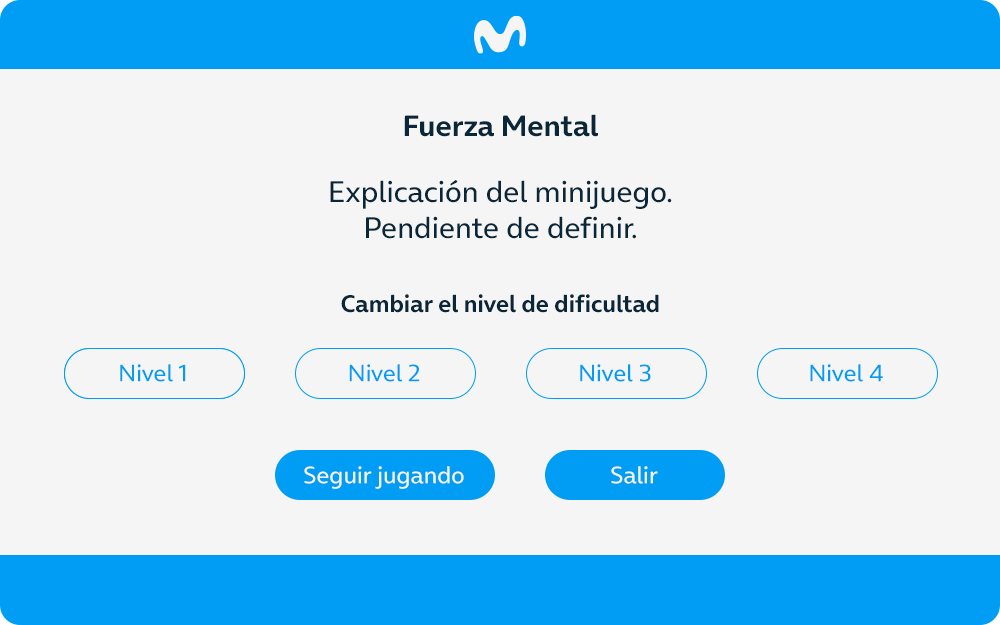
<style>
.page{position:relative;width:1000px;height:625px;background:#f5f5f5}
.page>*{position:absolute;margin:0}
.t1{font:30px "OnAir-Bold";color:#0a2739}
.t2{font:30px "OnAir-Regular";color:#0a2739}
.t3{font:24px "OnAir-Bold";color:#0a2739}
.t4{font:24px "OnAir-Regular";color:#019df4}
.t5{font:24px "OnAir-Regular";color:#f5f5f5}
</style>
<div class="page">
<p class="t1" style="left:404px;top:114px;width:194px;height:23px">Fuerza Mental</p>
<p class="t2" style="left:330px;top:180px;width:342px;height:59px;text-align:center">Explicación del minijuego.<br>Pendiente de definir.</p>
<p class="t3" style="left:341px;top:294px;width:318px;height:19px">Cambiar el nivel de dificultad</p>
<p class="t4" style="left:120px;top:364px;width:66px;height:18px">Nivel 1</p>
<p class="t4" style="left:120px;top:364px;width:66px;height:18px">Nivel 1</p>
<p class="t4" style="left:349px;top:364px;width:71px;height:18px">Nivel 2</p>
<p class="t4" style="left:580px;top:364px;width:71px;height:18px">Nivel 3</p>
<p class="t4" style="left:810px;top:364px;width:73px;height:18px">Nivel 4</p>
<p class="t5" style="left:304px;top:466px;width:160px;height:23px">Seguir jugando</p>
<p class="t5" style="left:611px;top:466px;width:47px;height:18px">Salir</p>
</div>
